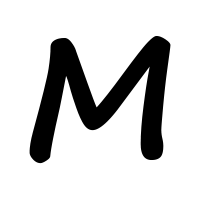
<style>
.page{position:relative;width:200px;height:200px;background:#ffffff}
.page>*{position:absolute;margin:0}
.t1{font:170px "SegoePrint-Bold";color:#000000}
</style>
<div class="page">
<p class="t1" style="left:29px;top:36px;width:142px;height:128px">M</p>
</div>
